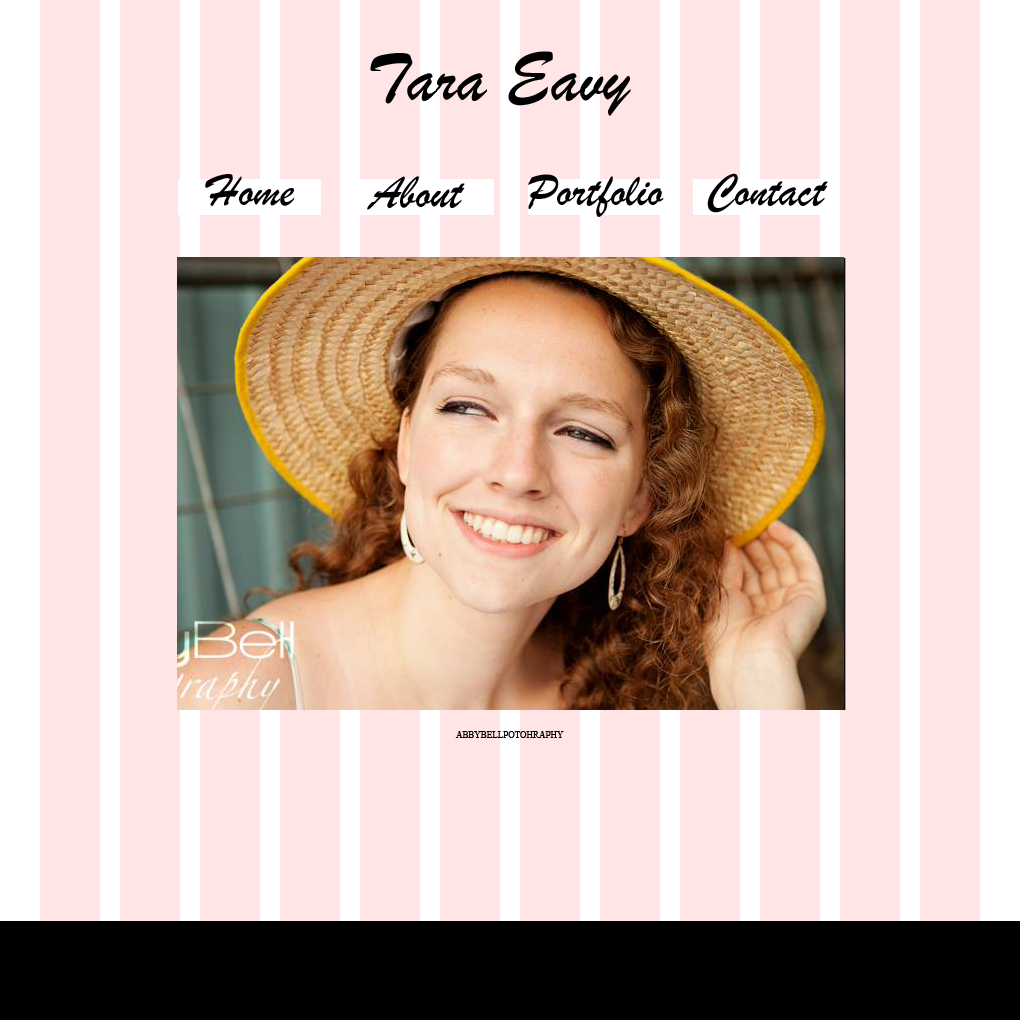
<style>
.page{position:relative;width:1020px;height:1020px;background:#ffe5e5}
.page>*{position:absolute;margin:0}
.t1{font:71.7px "BrushScriptMT";color:#000000}
.t2{font:47.8px "BrushScriptMT";color:#000000}
.t3{font:9px "TimesNewRomanPSMT";color:#000000;text-transform:uppercase}
</style>
<div class="page">
<p class="t1" style="left:370px;top:51px;width:261px;height:65px">Tara Eavy</p>
<p class="t2" style="left:205px;top:174px;width:90px;height:32px">Home</p>
<p class="t2" style="left:528px;top:174px;width:136px;height:43px">Portfolio</p>
<p class="t2" style="left:707px;top:173px;width:121px;height:40px">Contact</p>
<p class="t2" style="left:367px;top:176px;width:98px;height:34px">About</p>
<p class="t3" style="left:455px;top:731px;width:109px;height:7px">abbybellpotohraphy</p>
</div>
